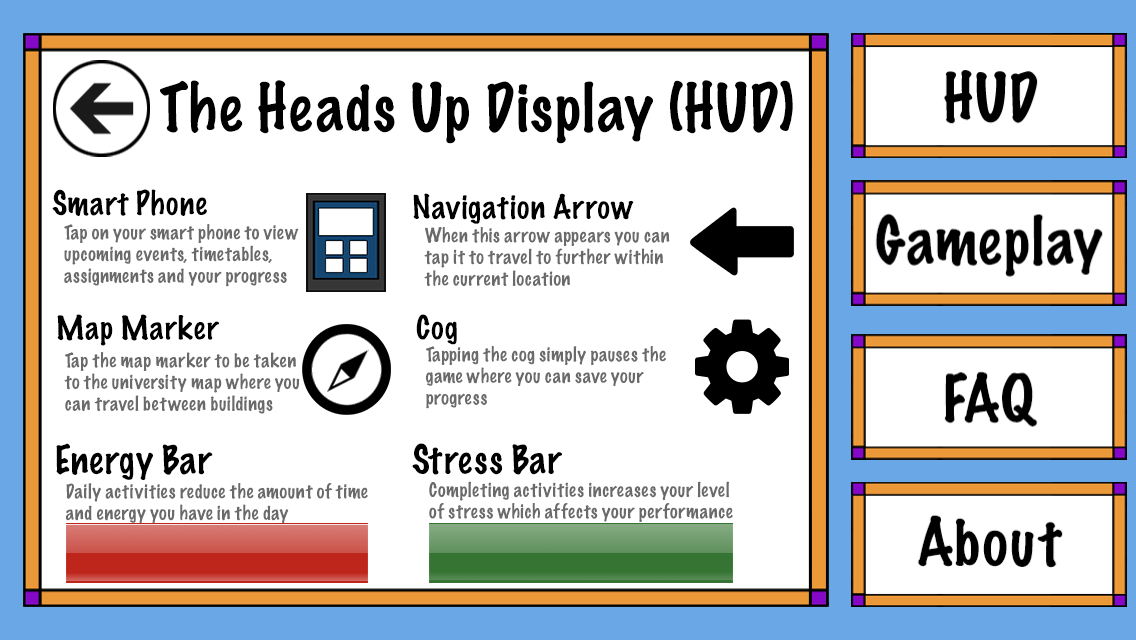
<style>
.page{position:relative;width:1136px;height:640px;background:#ffffff}
.page>*{position:absolute;margin:0}
.t1{font:60px "MarkerFelt-Thin";color:#000000}
.t2{font:30px "MarkerFelt-Thin";color:#000000}
.t3{font:18px "MarkerFelt-Thin";color:#6a6a6a}
.t4{font:36px "MarkerFelt-Thin";color:#000000}
</style>
<div class="page">
<p class="t1" style="left:160px;top:80px;width:633px;height:64px">The Heads Up Display (HUD)</p>
<p class="t2" style="left:52px;top:189px;width:155px;height:27px">Smart Phone</p>
<p class="t2" style="left:413px;top:193px;width:221px;height:31px">Navigation Arrow</p>
<p class="t3" style="left:64px;top:224px;width:235px;height:63px">Tap on your smart phone to view<br>upcoming events, timetables,<br>assignments and your progress</p>
<p class="t3" style="left:424px;top:227px;width:246px;height:59px">When this arrow appears you can <br>tap it to travel to further within<br>the current location</p>
<p class="t2" style="left:57px;top:314px;width:162px;height:32px">Map Marker</p>
<p class="t2" style="left:416px;top:314px;width:41px;height:31px">Cog</p>
<p class="t3" style="left:64px;top:352px;width:236px;height:62px">Tap the map marker to be taken <br>to the university map where you<br>can travel between buildings</p>
<p class="t3" style="left:426px;top:346px;width:240px;height:63px">Tapping the cog simply pauses the<br>game where you can save your<br>progress</p>
<p class="t4" style="left:56px;top:443px;width:157px;height:37px">Energy Bar</p>
<p class="t4" style="left:412px;top:443px;width:150px;height:32px">Stress Bar</p>
<p class="t3" style="left:66px;top:483px;width:302px;height:40px">Daily activities reduce the amount of time<br>and energy you have in the day</p>
<p class="t3" style="left:429px;top:481px;width:304px;height:41px">Completing activities increases your level<br>of stress which affects your performance</p>
</div>
